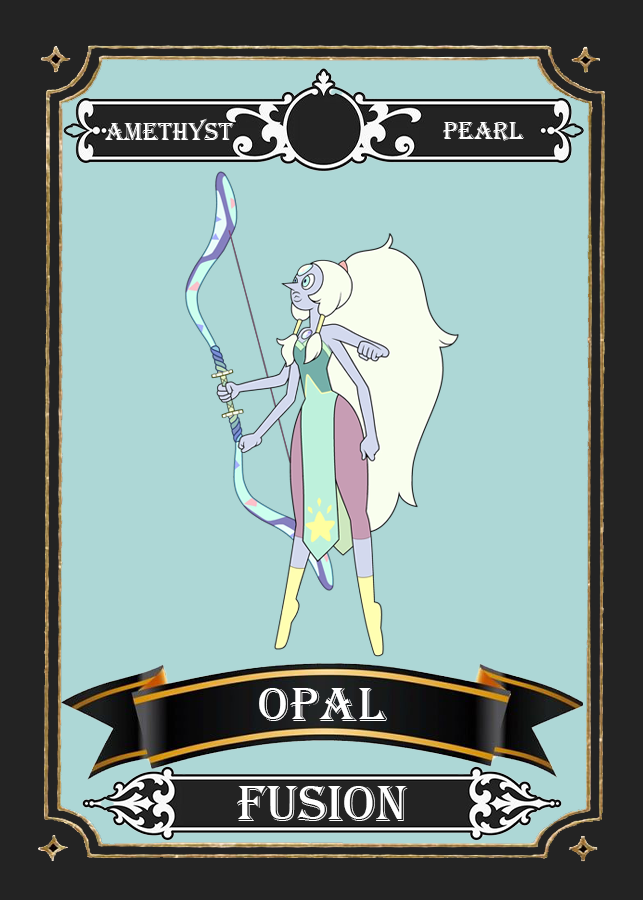
<style>
.page{position:relative;width:643px;height:900px;background:#add7d6}
.page>*{position:absolute;margin:0}
.t1{font:25.2px "Algerian";color:#ffffff}
.t2{font:50.4px "Algerian";color:#ffffff}
.t3{font:52.6px "Algerian";color:#ffffff}
</style>
<div class="page">
<p class="t1" style="left:105px;top:118px;width:129px;height:22px">amethyst</p>
<p class="t1" style="left:443px;top:122px;width:81px;height:19px">Pearl</p>
<p class="t2" style="left:259px;top:688px;width:128px;height:33px">Opal</p>
<p class="t3" style="left:237px;top:786px;width:171px;height:35px">Fusion</p>
</div>
